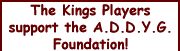
<style>
.page{position:relative;width:180px;height:51px;background:#ffffff}
.page>*{position:absolute;margin:0}
.t1{font:14px "ComicSansMS-Bold";color:#660000}
</style>
<div class="page">
<p class="t1" style="left:9px;top:4px;width:162px;height:46px;text-align:center">The Kings Players support the A.D.D.Y.G. Foundation!</p>
</div>
